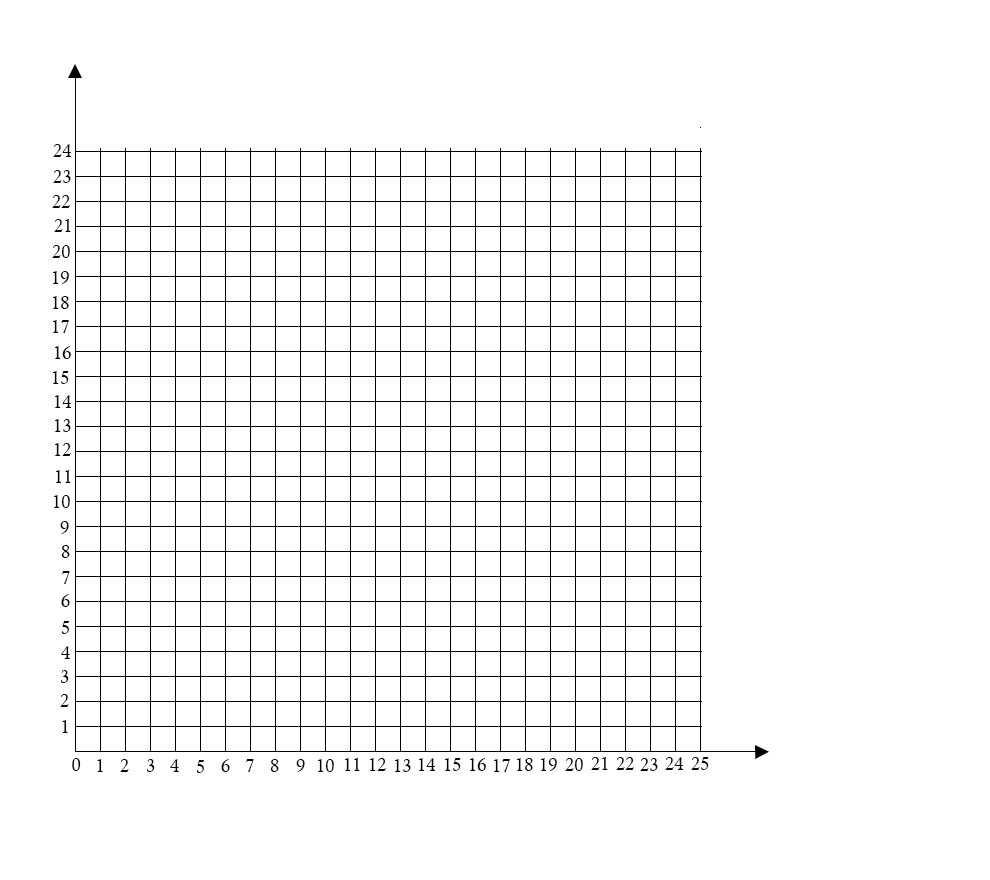
<style>
.page{position:relative;width:990px;height:880px;background:#ffffff}
.page>*{position:absolute;margin:0}
.t1{font:18px "CalistoMT";letter-spacing:0.009em;color:#060606}
</style>
<div class="page">
<p class="t1" style="left:53px;top:144px;width:19px;height:13px">24</p>
<p class="t1" style="left:53px;top:170px;width:18px;height:13px">23</p>
<p class="t1" style="left:52px;top:195px;width:18px;height:13px">22</p>
<p class="t1" style="left:54px;top:219px;width:17px;height:13px">21</p>
<p class="t1" style="left:52px;top:245px;width:18px;height:13px">20</p>
<p class="t1" style="left:53px;top:271px;width:16px;height:13px">19</p>
<p class="t1" style="left:53px;top:296px;width:16px;height:13px">18</p>
<p class="t1" style="left:53px;top:320px;width:16px;height:13px">17</p>
<p class="t1" style="left:55px;top:346px;width:16px;height:13px">16</p>
<p class="t1" style="left:53px;top:371px;width:16px;height:13px">15</p>
<p class="t1" style="left:55px;top:395px;width:17px;height:13px">14</p>
<p class="t1" style="left:55px;top:419px;width:16px;height:13px">13</p>
<p class="t1" style="left:55px;top:443px;width:16px;height:13px">12</p>
<p class="t1" style="left:56px;top:470px;width:15px;height:13px">11</p>
<p class="t1" style="left:54px;top:495px;width:16px;height:13px">10</p>
<p class="t1" style="left:60px;top:521px;width:9px;height:13px">9</p>
<p class="t1" style="left:61px;top:545px;width:9px;height:13px">8</p>
<p class="t1" style="left:62px;top:571px;width:8px;height:13px">7</p>
<p class="t1" style="left:61px;top:594px;width:9px;height:13px">6</p>
<p class="t1" style="left:61px;top:621px;width:9px;height:13px">5</p>
<p class="t1" style="left:61px;top:646px;width:9px;height:13px">4</p>
<p class="t1" style="left:61px;top:670px;width:8px;height:13px">3</p>
<p class="t1" style="left:60px;top:694px;width:9px;height:13px">2</p>
<p class="t1" style="left:62px;top:720px;width:6px;height:13px">1</p>
<p class="t1" style="left:72px;top:758px;width:9px;height:13px">0</p>
<p class="t1" style="left:97px;top:759px;width:6px;height:13px">1</p>
<p class="t1" style="left:120px;top:759px;width:9px;height:13px">2</p>
<p class="t1" style="left:147px;top:759px;width:8px;height:13px">3</p>
<p class="t1" style="left:170px;top:759px;width:9px;height:13px">4</p>
<p class="t1" style="left:196px;top:760px;width:9px;height:13px">5</p>
<p class="t1" style="left:221px;top:759px;width:9px;height:13px">6</p>
<p class="t1" style="left:246px;top:759px;width:8px;height:13px">7</p>
<p class="t1" style="left:270px;top:759px;width:9px;height:13px">8</p>
<p class="t1" style="left:296px;top:759px;width:9px;height:13px">9</p>
<p class="t1" style="left:318px;top:759px;width:16px;height:13px">10</p>
<p class="t1" style="left:345px;top:758px;width:15px;height:13px">11</p>
<p class="t1" style="left:370px;top:758px;width:16px;height:13px">12</p>
<p class="t1" style="left:395px;top:759px;width:16px;height:13px">13</p>
<p class="t1" style="left:419px;top:758px;width:17px;height:13px">14</p>
<p class="t1" style="left:445px;top:758px;width:16px;height:13px">15</p>
<p class="t1" style="left:470px;top:758px;width:16px;height:13px">16</p>
<p class="t1" style="left:494px;top:759px;width:16px;height:13px">17</p>
<p class="t1" style="left:517px;top:758px;width:16px;height:13px">18</p>
<p class="t1" style="left:541px;top:758px;width:16px;height:13px">19</p>
<p class="t1" style="left:565px;top:758px;width:18px;height:13px">20</p>
<p class="t1" style="left:591px;top:757px;width:17px;height:13px">21</p>
<p class="t1" style="left:616px;top:757px;width:18px;height:13px">22</p>
<p class="t1" style="left:640px;top:758px;width:18px;height:13px">23</p>
<p class="t1" style="left:665px;top:757px;width:19px;height:13px">24</p>
<p class="t1" style="left:691px;top:757px;width:18px;height:13px">25</p>
</div>
